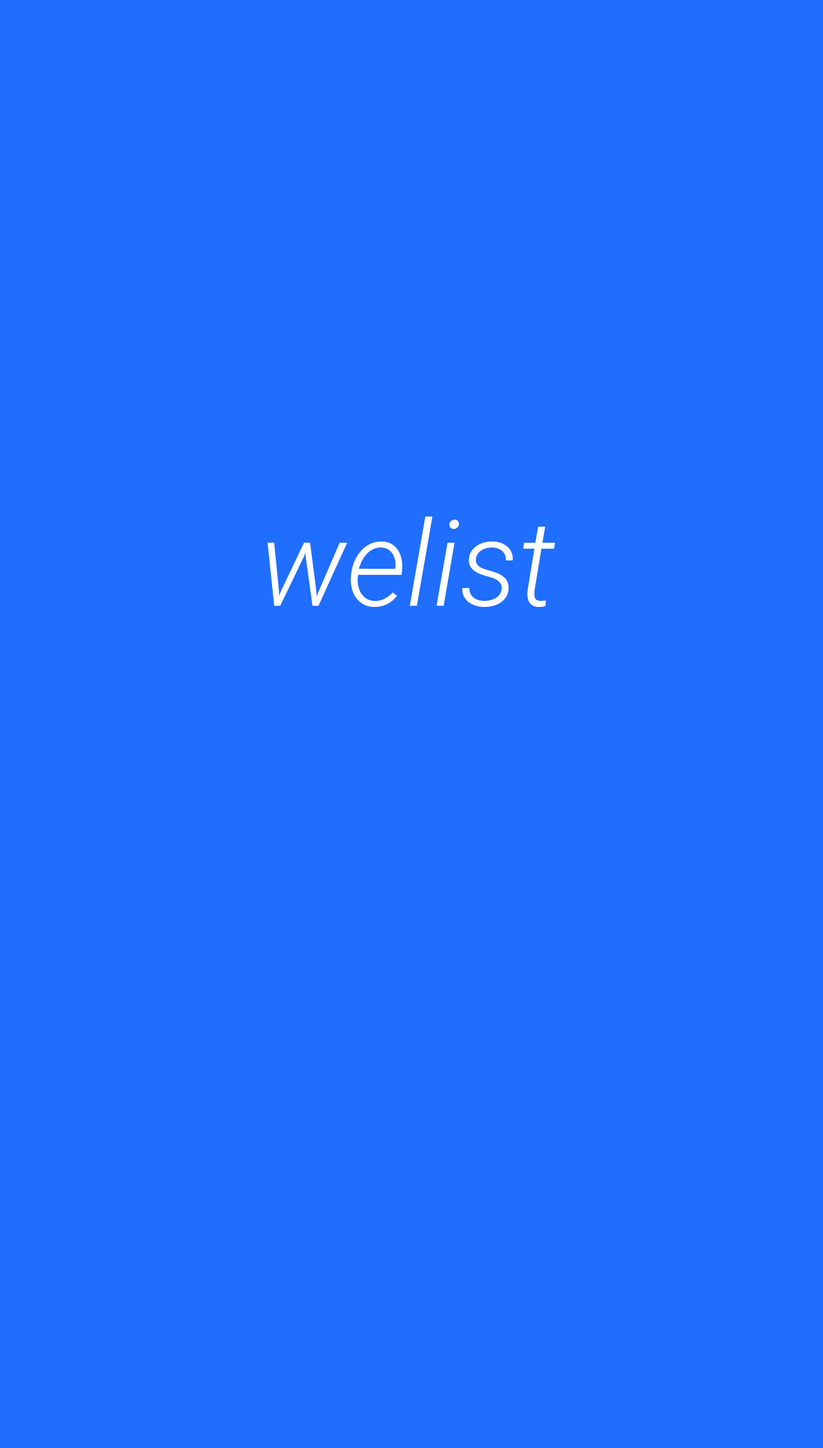
<style>
.page{position:relative;width:823px;height:1448px;background:#1f6efd}
.page>*{position:absolute;margin:0}
.t1{font:118.9px "Roboto-LightItalic";color:#ffffff}
</style>
<div class="page">
<p class="t1" style="left:268px;top:517px;width:287px;height:90px">welist</p>
</div>
